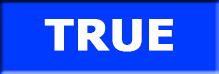
<style>
.page{position:relative;width:219px;height:74px;background:#003afe}
.page>*{position:absolute;margin:0}
.t1{font:43px "Verdana-Bold";color:#ffffff;font-weight:bold}
</style>
<div class="page">
<p class="t1" style="left:44px;top:19px;width:129px;height:33px">TRUE</p>
</div>
